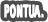
<style>
.page{position:relative;width:48px;height:22px;background:#4c4c4c}
.page>*{position:absolute;margin:0}
.t1{font:15.7px "RodinPro-EB";color:#ffffff;font-weight:bold;scale:0.51 1}
</style>
<div class="page">
<p class="t1" style="left:4px;top:4px;width:40px;height:14px">PONTUA.</p>
</div>
